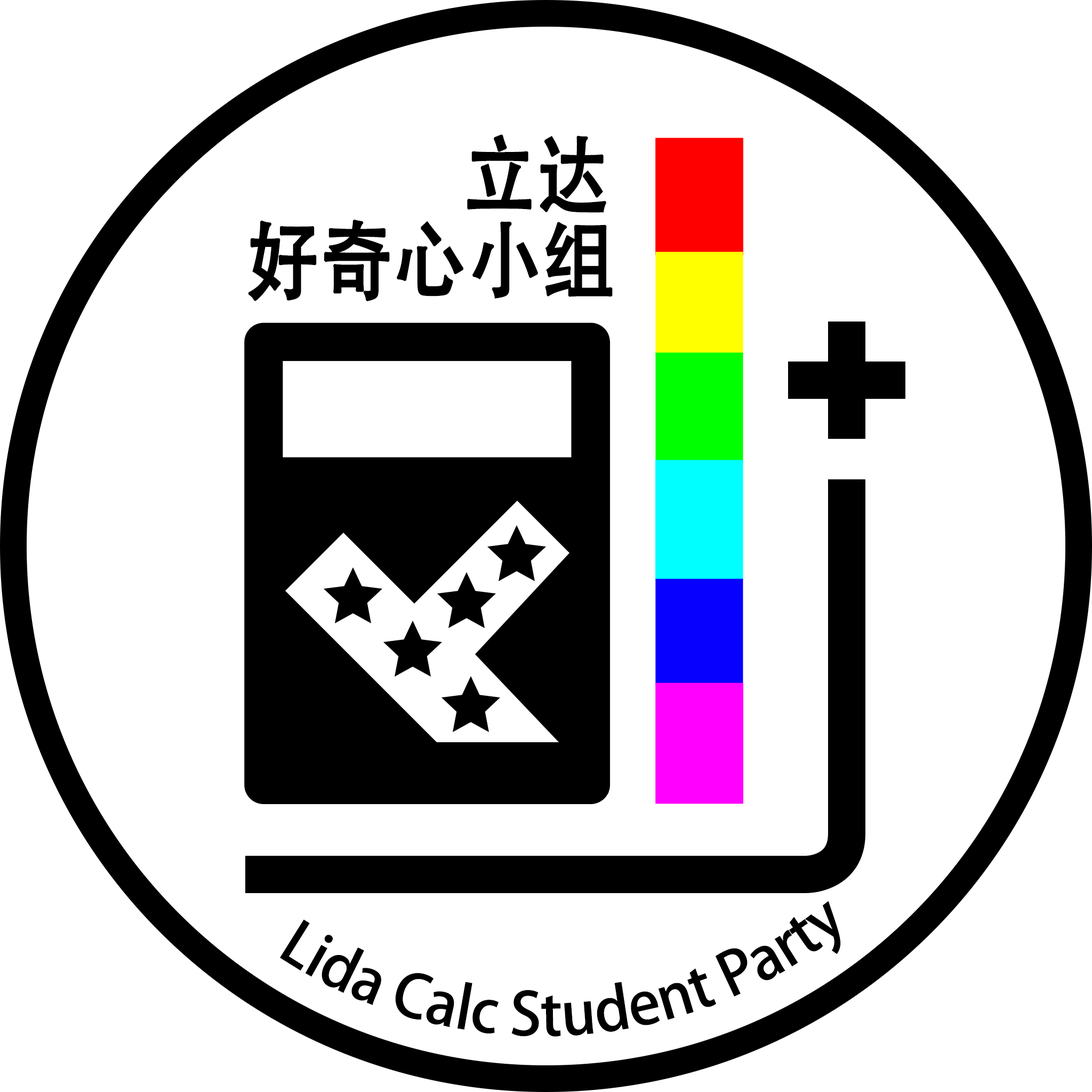
<style>
.page{position:relative;width:1092px;height:1092px;background:#ffffff}
.page>*{position:absolute;margin:0}
.t1{font:85.1px/85.3px "AdobeHeitiStd-Regular";color:#000000;font-weight:bold;scale:0.85 1}
.t2{font:58.7px/58.8px "AdobeHeitiStd-Regular";color:#000000}
</style>
<div class="page">
<p class="t1" style="left:248px;top:134px;width:365px;height:167px">立达<br>好奇心小组</p>
<p class="t2" style="left:280px;top:901px;width:561px;height:136px">Lida Calc Student Party</p>
</div>
